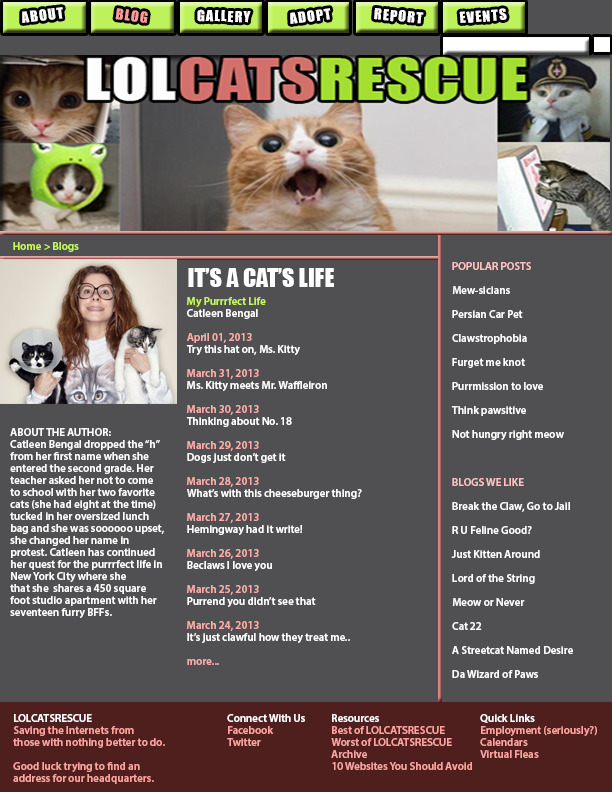
<style>
.page{position:relative;width:612px;height:792px;background:#505052}
.page>*{position:absolute;margin:0}
.t1{font:14px "Impact";letter-spacing:0.075em;color:#ffffff;scale:1.03 1}
.t2{font:14px "Impact";letter-spacing:0.075em;color:#fb9c98;scale:1.03 1}
.t3{font:14px "Impact";letter-spacing:0.075em;color:#fdfdfd;scale:1.03 1}
.t4{font:11px "MyriadPro-Semibold";color:#c3f95d}
.t5{font:24px "Impact";color:#fdfdfd}
.t6{font:11px/24px "MyriadPro-Semibold";color:#fdfdfd}
.t7{font:11px/24px "MyriadPro-Semibold";color:#fdc1c1}
.t8{font:11px/12px "MyriadPro-Semibold";color:#ffffff}
.t9{font:11px/12px "MyriadPro-Semibold";color:#c3f95d}
.t10{font:11px/12px "MyriadPro-Semibold";color:#fdfdfd}
.t11{font:11px/12px "MyriadPro-Semibold";color:#fcada9}
.t12{font:11px/12px "MyriadPro-Semibold";color:#fda29e}
</style>
<div class="page">
<p class="t1" style="left:22px;top:7px;width:41px;height:16px;rotate:-7deg">ABOUT</p>
<p class="t2" style="left:115px;top:8px;width:33px;height:15px;rotate:7deg">BLOG</p>
<p class="t1" style="left:197px;top:9px;width:54px;height:14px;rotate:2deg">GALLERY</p>
<p class="t1" style="left:290px;top:8px;width:41px;height:16px;rotate:-8deg">ADOPT</p>
<p class="t3" style="left:374px;top:8px;width:50px;height:16px;rotate:5deg">REPORT</p>
<p class="t1" style="left:459px;top:8px;width:48px;height:15px;rotate:-4deg">EVENTS</p>
<p class="t4" style="left:13px;top:242px;width:66px;height:10px">Home &gt; Blogs</p>
<p class="t5" style="left:188px;top:268px;width:146px;height:19px">IT’S A CAT’S LIFE</p>
<p class="t6" style="left:451px;top:262px;width:122px;height:416px"><span class="t7">POPULAR POSTS<br></span>Mew-sicians<br>Persian Car Pet<br>Clawstrophobia<br>Furget me knot<br>Purrmission to love<br>Think pawsitive<br>Not hungry right meow<br><br><span class="t7">BLOGS WE LIKE<br></span>Break the Claw, Go to Jail<br>R U Feline Good?<br>Just Kitten Around<br>Lord of the String<br>Meow or Never<br>Cat 22<br>A Streetcat Named Desire<br>Da Wizard of Paws</p>
<p class="t8" style="left:186px;top:297px;width:176px;height:368px"><span class="t9">My Purrrfect Life<br></span><span class="t10">Catleen Bengal<br><br></span><span class="t11">April 01, 2013<br></span>Try this hat on, Ms. Kitty<br><br><span class="t11">March 31, 2013<br></span>Ms. Kitty meets Mr. Waffleiron<br><br><span class="t11">March 30, 2013<br></span>Thinking about No. 18<br><br><span class="t11">March 29, 2013<br></span>Dogs just don’t get it<br><br><span class="t11">March 28, 2013<br></span>What’s with this cheeseburger thing?<br><br><span class="t11">March 27, 2013<br></span>Hemingway had it write!<br><br><span class="t11">March 26, 2013<br></span>Beclaws I love you<br><br><span class="t11">March 25, 2013<br></span>Purrend you didn’t see that<br><br><span class="t11">March 24, 2013<br></span>It’s just clawful how they treat me..<br><br><span class="t11">more...</span></p>
<p class="t10" style="left:10px;top:428px;width:154px;height:190px">ABOUT THE AUTHOR:<br>Catleen Bengal dropped the “h”<br>from her first name when she <br>entered the second grade. Her<br>teacher asked her not to come<br>to school with her two favorite<br>cats (she had eight at the time) <br>tucked in her oversized lunch <br>bag and she was soooooo upset,<br>she changed her name in <br>protest. Catleen has continued<br>her quest for the purrrfect life in<br>New York City where she<br>that she  shares a 450 square<br>foot studio apartment with her<br>seventeen furry BFFs.</p>
<p class="t12" style="left:13px;top:714px;width:152px;height:70px"><span class="t8">LOLCATSRESCUE<br></span>Saving the Internets from <br>those with nothing better to do.<br><br>Good luck trying to find an <br>address for our headquarters.</p>
<p class="t12" style="left:227px;top:714px;width:78px;height:32px"><span class="t8">Connect With Us<br></span>Facebook<br>Twitter</p>
<p class="t12" style="left:331px;top:714px;width:141px;height:56px"><span class="t8">Resources<br></span>Best of LOLCATSRESCUE<br>Worst of LOLCATSRESCUE<br>Archive<br>10 Websites You Should Avoid</p>
<p class="t12" style="left:480px;top:714px;width:117px;height:44px"><span class="t8">Quick Links<br></span>Employment (seriously?)<br>Calendars<br>Virtual Fleas</p>
</div>
